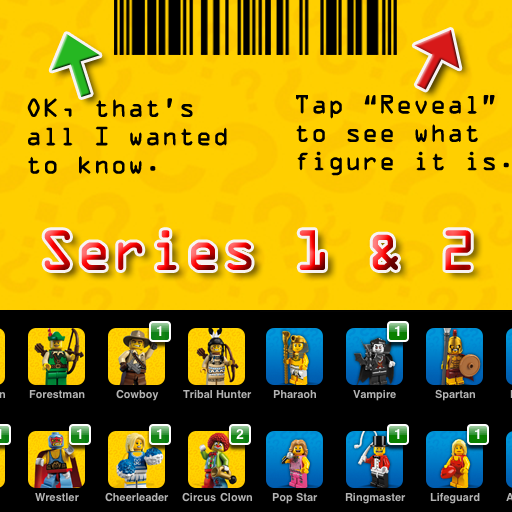
<style>
.page{position:relative;width:512px;height:512px;background:#000000}
.page>*{position:absolute;margin:0}
.t1{font:23.6px "OCRAStd";color:#000000}
.t2{font:50.6px "OCRAStd"}
</style>
<div class="page">
<p class="t1" style="left:27px;top:98px;width:200px;height:76px">OK, that’s<br>all I wanted<br>to know.</p>
<p class="t1" style="left:296px;top:95px;width:213px;height:81px">Tap “Reveal”<br>to see what<br>figure it is.</p>
<p class="t2" style="left:44px;top:230px;width:427px;height:40px">Series 1 &amp; 2</p>
</div>
